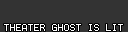
<style>
.page{position:relative;width:128px;height:32px;background:#333333}
.page>*{position:absolute;margin:0}
.t1{font:8px "Terminal";color:#ffffff}
</style>
<div class="page">
<p class="t1" style="left:4px;top:24px;width:119px;height:7px">THEATER GHOST IS LIT</p>
</div>
